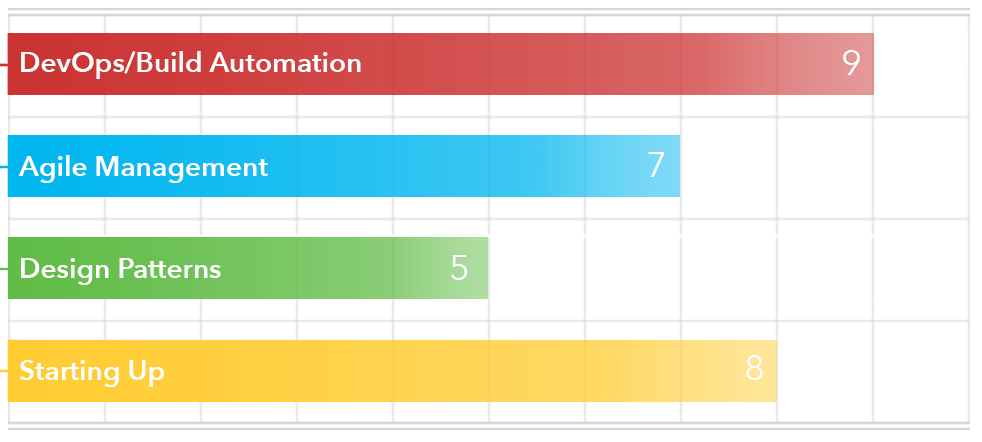
<style>
.page{position:relative;width:982px;height:442px;background:#ffffff}
.page>*{position:absolute;margin:0}
.t1{font:28px "AvenirNext-DemiBold";color:#ffffff}
.t2{font:36px "AvenirNext-Regular";color:#ffffff}
</style>
<div class="page">
<p class="t1" style="left:21px;top:51px;width:340px;height:28px">DevOps/Build Automation</p>
<p class="t2" style="left:843px;top:50px;width:17px;height:25px">9</p>
<p class="t1" style="left:18px;top:155px;width:250px;height:28px">Agile Management</p>
<p class="t2" style="left:648px;top:152px;width:16px;height:25px">7</p>
<p class="t2" style="left:451px;top:255px;width:17px;height:25px">5</p>
<p class="t1" style="left:21px;top:258px;width:200px;height:27px">Design Patterns</p>
<p class="t1" style="left:19px;top:360px;width:145px;height:27px">Starting Up</p>
<p class="t2" style="left:746px;top:355px;width:17px;height:25px">8</p>
</div>
